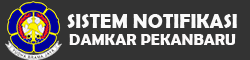
<style>
.page{position:relative;width:250px;height:60px;background:#333333}
.page>*{position:absolute;margin:0}
.t1{font:20px "BerlinSansFBDemi-Bold";color:#fafafa}
.t2{font:16px "BerlinSansFBDemi-Bold";color:#fbf9f9}
</style>
<div class="page">
<p class="t1" style="left:67px;top:14px;width:170px;height:14px">SISTEM NOTIFIKASI</p>
<p class="t2" style="left:69px;top:34px;width:167px;height:11px">DAMKAR PEKANBARU</p>
</div>
